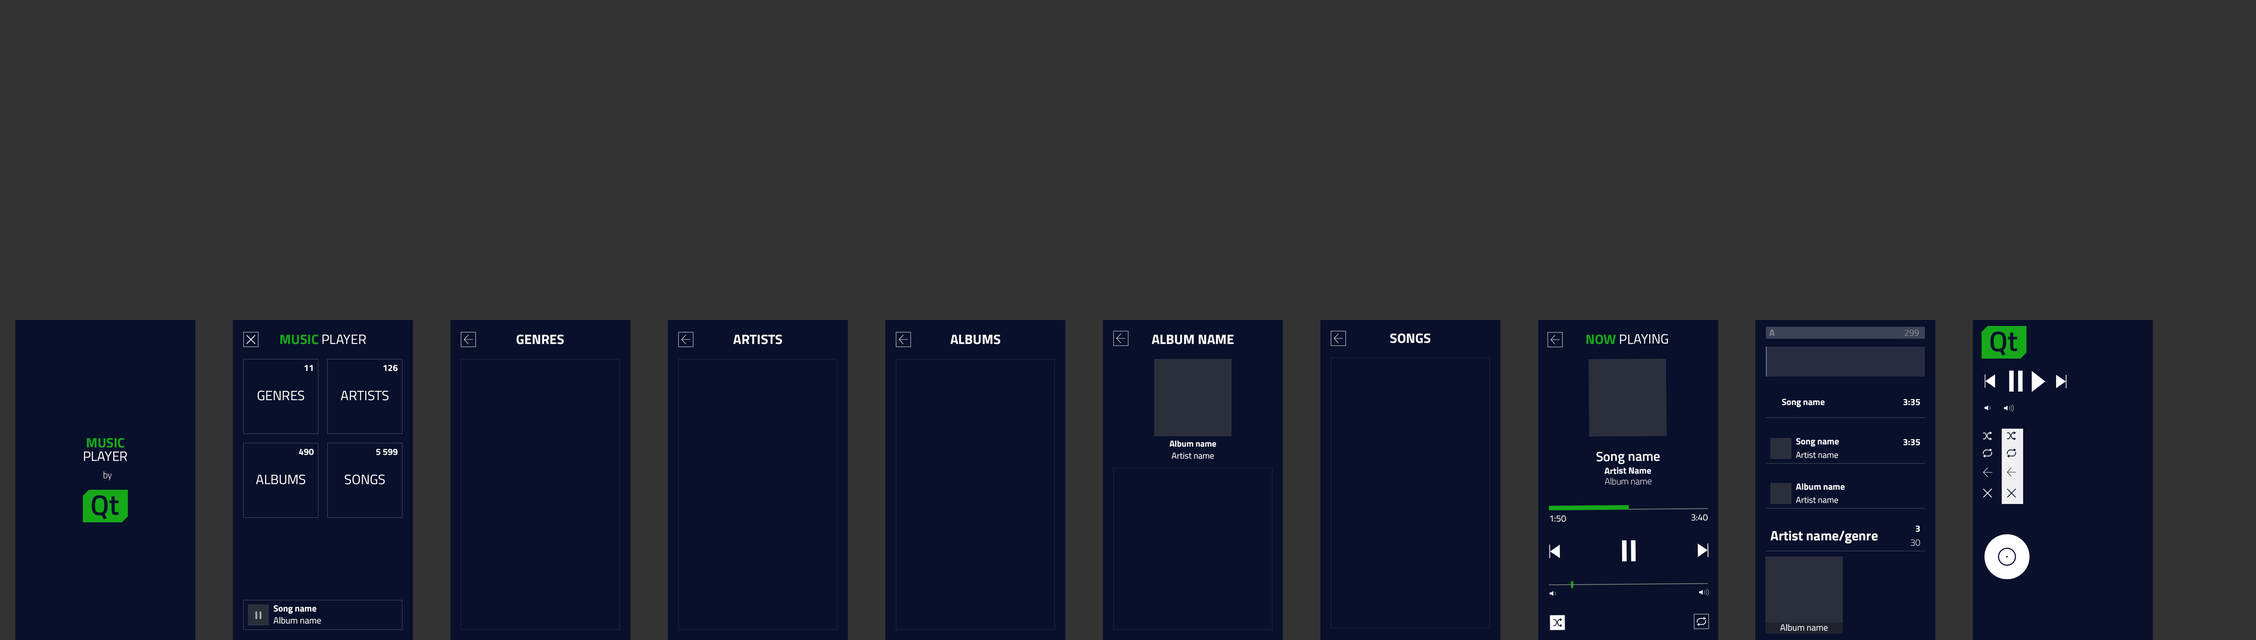
<style>
.page{position:relative;width:2256px;height:640px;background:#333333}
.page>*{position:absolute;margin:0}
.t1{font:9px "TitilliumWeb-Bold";color:#848895}
.t2{font:9px "TitilliumWeb-Regular";color:#848895}
.t3{font:13.5px "TitilliumWeb-Regular";color:#ffffff}
.t4{font:13.5px "TitilliumWeb-Bold";color:#17a81a}
.t5{font:13.5px "TitilliumWeb-Bold";color:#ffffff}
.t6{font:9px "TitilliumWeb-Bold";color:#ffffff}
.t7{font:13.5px/13.5px "TitilliumWeb-Regular";color:#ffffff}
.t8{font:13.5px/13.5px "TitilliumWeb-Bold";color:#17a81a}
.t9{font:8.6px "TitilliumWeb-Bold";color:#ffffff}
.t10{font:8.6px "TitilliumWeb-Regular";color:#ffffff}
.t11{font:13.5px "TitilliumWeb-SemiBold";color:#ffffff}
.t12{font:9px "TitilliumWeb-Thin";color:#ffffff}
.t13{font:9px "TitilliumWeb-Regular";color:#ffffff}
</style>
<div class="page">
<p class="t1" style="left:1769px;top:330px;width:5px;height:6px">A</p>
<p class="t2" style="left:1905px;top:330px;width:14px;height:6px">299</p>
<p class="t3" style="left:280px;top:335px;width:86px;height:10px"><span class="t4">MUSIC </span>PLAYER</p>
<p class="t5" style="left:516px;top:335px;width:48px;height:10px">GENRES</p>
<p class="t5" style="left:733px;top:335px;width:49px;height:10px">ARTISTS</p>
<p class="t5" style="left:950px;top:335px;width:50px;height:10px">ALBUMS</p>
<p class="t5" style="left:1152px;top:335px;width:82px;height:10px">ALBUM NAME</p>
<p class="t5" style="left:1390px;top:334px;width:41px;height:10px">SONGS</p>
<p class="t3" style="left:1586px;top:334px;width:82px;height:11px"><span class="t4">NOW </span>PLAYING</p>
<p class="t6" style="left:304px;top:365px;width:9px;height:6px">11</p>
<p class="t6" style="left:383px;top:365px;width:15px;height:7px">126</p>
<p class="t3" style="left:258px;top:391px;width:46px;height:10px">GENRES</p>
<p class="t3" style="left:340px;top:391px;width:48px;height:10px">ARTISTS</p>
<p class="t6" style="left:1782px;top:399px;width:43px;height:9px">Song name</p>
<p class="t6" style="left:1903px;top:399px;width:17px;height:7px">3:35</p>
<p class="t7" style="left:84px;top:438px;width:43px;height:23px;text-align:center"><span class="t8">MUSIC<br></span>PLAYER</p>
<p class="t6" style="left:299px;top:449px;width:15px;height:7px">490</p>
<p class="t6" style="left:376px;top:449px;width:22px;height:7px">5 599</p>
<p class="t9" style="left:1170px;top:441px;width:46px;height:6px">Album name</p>
<p class="t6" style="left:1796px;top:438px;width:43px;height:9px">Song name</p>
<p class="t6" style="left:1903px;top:439px;width:17px;height:7px">3:35</p>
<p class="t10" style="left:1172px;top:453px;width:42px;height:6px">Artist name</p>
<p class="t11" style="left:1596px;top:452px;width:64px;height:13px">Song name</p>
<p class="t10" style="left:1796px;top:452px;width:42px;height:7px">Artist name</p>
<p class="t12" style="left:104px;top:472px;width:8px;height:9px">by</p>
<p class="t6" style="left:1605px;top:468px;width:46px;height:7px">Artist Name</p>
<p class="t3" style="left:256px;top:475px;width:49px;height:10px">ALBUMS</p>
<p class="t3" style="left:345px;top:475px;width:40px;height:10px">SONGS</p>
<p class="t12" style="left:1605px;top:478px;width:47px;height:7px">Album name</p>
<p class="t6" style="left:1796px;top:484px;width:49px;height:6px">Album name</p>
<p class="t10" style="left:1796px;top:497px;width:42px;height:7px">Artist name</p>
<p class="t13" style="left:1550px;top:516px;width:16px;height:6px">1:50</p>
<p class="t13" style="left:1691px;top:514px;width:17px;height:7px">3:40</p>
<p class="t5" style="left:1770px;top:531px;width:108px;height:13px">Artist name/genre</p>
<p class="t6" style="left:1916px;top:526px;width:4px;height:6px">3</p>
<p class="t12" style="left:1911px;top:540px;width:9px;height:6px">30</p>
<p class="t6" style="left:274px;top:606px;width:42px;height:8px">Song name</p>
<p class="t13" style="left:273px;top:617px;width:48px;height:7px">Album name</p>
<p class="t13" style="left:1780px;top:624px;width:48px;height:8px">Album name</p>
</div>
